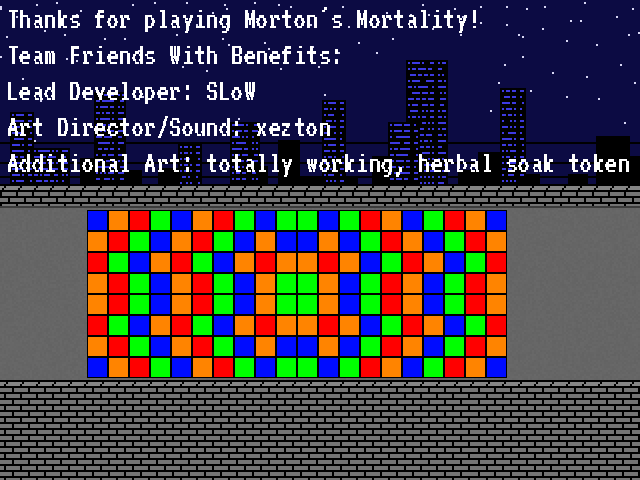
<style>
.page{position:relative;width:640px;height:480px;background:#0c0b43}
.page>*{position:absolute;margin:0}
.t1{font:30px "VT323";color:#ffffff}
</style>
<div class="page">
<p class="t1" style="left:8px;top:7px;width:621px;height:170px">Thanks for playing Morton's Mortality!<br>Team Friends With Benefits:<br>Lead Developer: SLoW<br>Art Director/Sound: xezton<br>Additional Art: totally working, herbal soak token</p>
</div>
